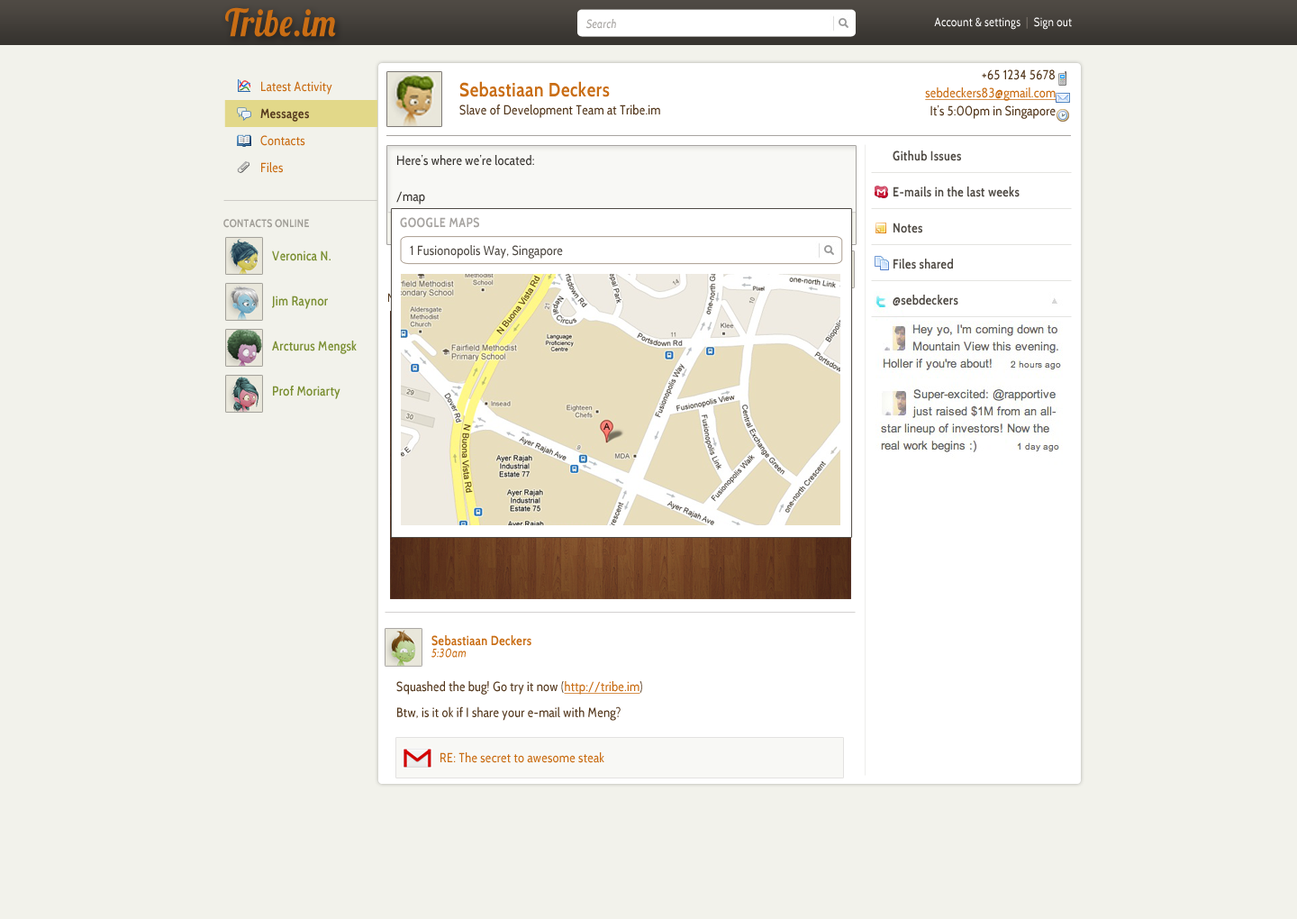
<style>
.page{position:relative;width:1297px;height:919px;background:#f2f2eb}
.page>*{position:absolute;margin:0}
.t1{font:37.8px "Lobster1.4";letter-spacing:0.025em;color:#c96d14;scale:0.88 1}
.t2{font:11.9px "Cabin-Regular";letter-spacing:0.025em;color:#ffffff;scale:0.88 1}
.t3{font:11.9px "Cabin-Regular";letter-spacing:0.025em;color:#7a736b;scale:0.88 1}
.t4{font:11.9px "Cabin-Italic";letter-spacing:0.025em;color:#a7a4a1;scale:0.88 1}
.t5{font:13px/18px "Cabin-Regular";letter-spacing:0.025em;color:#54381d;scale:0.88 1}
.t6{font:13px/18px "Cabin-Regular";letter-spacing:0.025em;color:#c96d14;text-decoration:underline;scale:0.88 1}
.t7{font:13px/27px "Cabin-Regular";letter-spacing:0.025em;color:#c96d14;scale:0.88 1}
.t8{font:13px/27px "Cabin-Bold";letter-spacing:0.025em;color:#54381d;scale:0.88 1}
.t9{font:19.5px/18px "Cabin-Bold";letter-spacing:0.025em;color:#c96d14;scale:0.88 1}
.t10{font:13px/18px "Cabin-Regular";letter-spacing:0.025em;color:#36332f;scale:0.88 1}
.t11{font:13px/36px "Cabin-Bold";letter-spacing:0.025em;color:#4f4a44;scale:0.88 1}
.t12{font:10.8px "Cabin-Bold";letter-spacing:0.025em;color:#a09e97;text-transform:uppercase;scale:0.88 1}
.t13{font:13px "Cabin-Bold";letter-spacing:0.025em;color:#a7a4a1;text-transform:uppercase;scale:0.88 1}
.t14{font:13px "Cabin-Regular";letter-spacing:0.025em;color:#4f4a44;scale:0.88 1}
.t15{font:13px/45.1px "Cabin-SemiBold";letter-spacing:0.025em;color:#7c9034;scale:0.88 1}
.t16{font:13px "Cabin-Bold";letter-spacing:0.025em;color:#c96d14;scale:0.88 1}
.t17{font:11.9px "Cabin-Italic";letter-spacing:0.025em;color:#c96d14;scale:0.88 1}
.t18{font:13px "Cabin-Regular";letter-spacing:0.025em;color:#54381d;scale:0.88 1}
.t19{font:13px "Cabin-Regular";letter-spacing:0.025em;color:#c96d14;text-decoration:underline;scale:0.88 1}
.t20{font:13px "Cabin-Regular";letter-spacing:0.025em;color:#c96d14;scale:0.88 1}
</style>
<div class="page">
<p class="t1" style="left:225px;top:7px;width:111px;height:30px">Tribe.im</p>
<p class="t2" style="left:934px;top:17px;width:138px;height:13px">Account &amp; settings  <span class="t3">|</span>  Sign out</p>
<p class="t4" style="left:587px;top:19px;width:29px;height:10px">Search</p>
<p class="t5" style="left:925px;top:69px;width:132px;height:50px;text-align:right">+65 1234 5678<br><span class="t6">sebdeckers83@gmail.com<br></span>It’s 5:00pm in Singapore</p>
<p class="t7" style="left:260px;top:81px;width:72px;height:92px">Latest Activity<br><span class="t8">Messages<br></span>Contacts<br>Files</p>
<p class="t5" style="left:460px;top:81px;width:200px;height:37px"><span class="t9">Sebastiaan Deckers<br></span>Slave of Development Team at Tribe.im</p>
<p class="t10" style="left:396px;top:155px;width:138px;height:50px">Here’s where we’re located:<br><br>/map</p>
<p class="t11" style="left:893px;top:150px;width:127px;height:156px">Github Issues<br>E-mails in the last weeks<br>Notes<br>Files shared<br>@sebdeckers</p>
<p class="t12" style="left:223px;top:219px;width:86px;height:9px">Contacts Online</p>
<p class="t13" style="left:400px;top:217px;width:79px;height:11px">Google Maps</p>
<p class="t14" style="left:410px;top:245px;width:153px;height:14px">1 Fusionopolis Way, Singapore</p>
<p class="t15" style="left:272px;top:250px;width:85px;height:149px">Veronica N.<br>Jim Raynor<br>Arcturus Mengsk<br>Prof Moriarty</p>
<p class="t16" style="left:432px;top:635px;width:100px;height:23px">Sebastiaan Deckers<br><span class="t17">5:30am</span></p>
<p class="t18" style="left:396px;top:681px;width:246px;height:40px">Squashed the bug! Go try it now (<span class="t19">http://tribe.im</span>)<br><br>Btw, is it ok if I share your e-mail with Meng?</p>
<p class="t20" style="left:441px;top:752px;width:164px;height:11px">RE: The secret to awesome steak</p>
</div>
